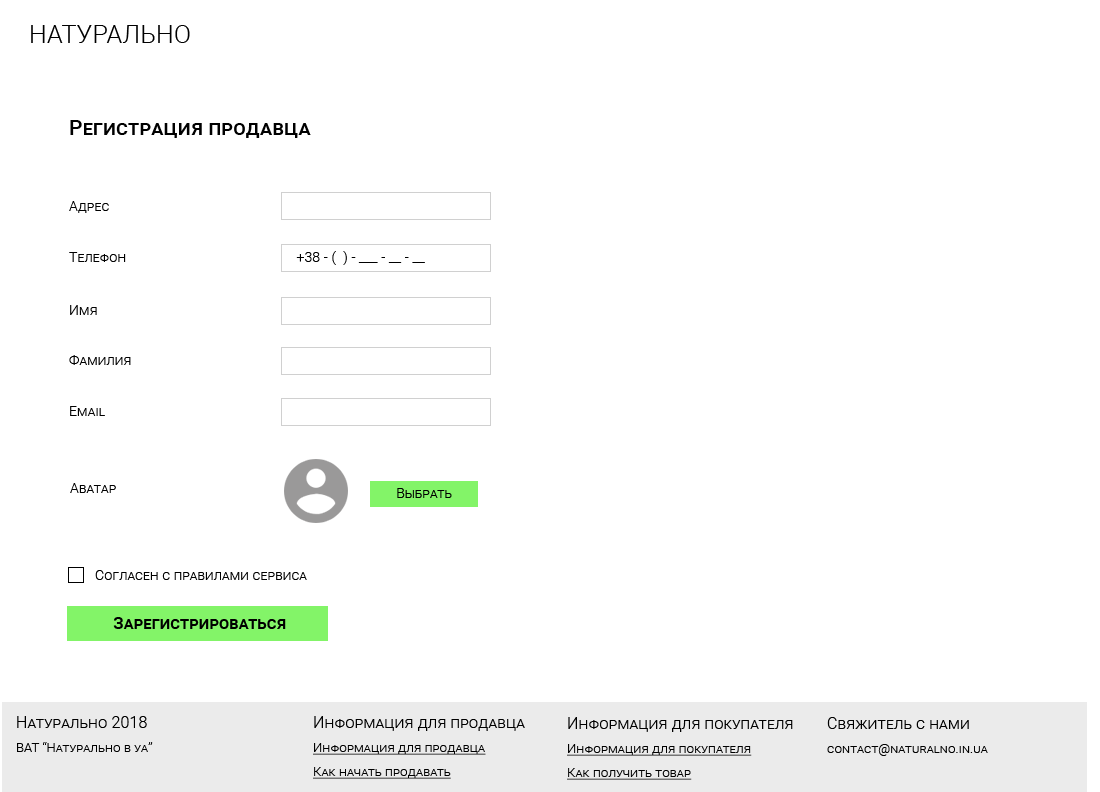
<style>
.page{position:relative;width:1100px;height:792px;background:#ffffff}
.page>*{position:absolute;margin:0}
.t1{font:25px "Roboto-Light";letter-spacing:0.01em;color:#000000;font-variant:small-caps}
.t2{font:21px "Roboto-Medium";letter-spacing:0.01em;color:#000000;font-variant:small-caps}
.t3{font:14px "Roboto-Light";letter-spacing:0.01em;color:#000000;font-variant:small-caps}
.t4{font:17px "Roboto-Medium";letter-spacing:0.01em;color:#000000;font-variant:small-caps}
.t5{font:13px/24px "Roboto-Light";letter-spacing:0.01em;color:#000000;font-variant:small-caps}
.t6{font:16px/26px "Roboto-Light";letter-spacing:0.01em;color:#000000;font-variant:small-caps}
.t7{font:13px/24px "Roboto-Light";letter-spacing:0.01em;color:#000000;font-variant:small-caps;text-decoration:underline}
</style>
<div class="page">
<p class="t1" style="left:31px;top:25px;width:159px;height:18px">НАТУРАЛЬНО</p>
<p class="t2" style="left:70px;top:120px;width:241px;height:18px">Регистрация продавца</p>
<p class="t3" style="left:69px;top:201px;width:40px;height:12px">Адрес</p>
<p class="t3" style="left:69px;top:251px;width:356px;height:14px">Телефон                                                +38 - (  ) - ___ - __ - __</p>
<p class="t3" style="left:70px;top:305px;width:27px;height:10px">Имя</p>
<p class="t3" style="left:69px;top:355px;width:62px;height:10px">Фамилия</p>
<p class="t3" style="left:70px;top:406px;width:35px;height:10px">Email</p>
<p class="t3" style="left:70px;top:483px;width:46px;height:10px">Аватар</p>
<p class="t3" style="left:397px;top:488px;width:55px;height:10px">Выбрать</p>
<p class="t3" style="left:95px;top:570px;width:212px;height:10px">Согласен с правилами сервиса</p>
<p class="t4" style="left:113px;top:617px;width:173px;height:12px">Зарегистрироваться</p>
<p class="t5" style="left:17px;top:716px;width:136px;height:36px"><span class="t6">Натурально 2018<br></span>ВАТ “Натурально в уа”</p>
<p class="t7" style="left:313px;top:716px;width:212px;height:63px"><span class="t6">Информация для продавца<br></span>Информация для продавца<br>Как начать продавать</p>
<p class="t7" style="left:567px;top:717px;width:226px;height:63px"><span class="t6">Информация для покупателя<br></span>Информация для покупателя<br>Как получить товар</p>
<p class="t5" style="left:827px;top:717px;width:161px;height:39px"><span class="t6">Свяжитель с нами<br></span>contact@naturalno.in.ua</p>
</div>
